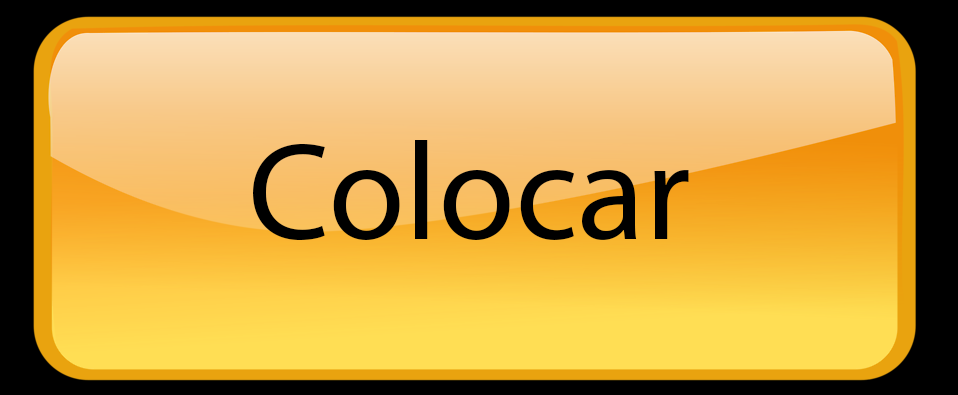
<style>
.page{position:relative;width:958px;height:395px}
.page>*{position:absolute;margin:0}
.t1{font:140px "MyriadPro-Regular";color:#000000}
</style>
<div class="page">
<p class="t1" style="left:253px;top:140px;width:436px;height:100px">Colocar</p>
</div>
